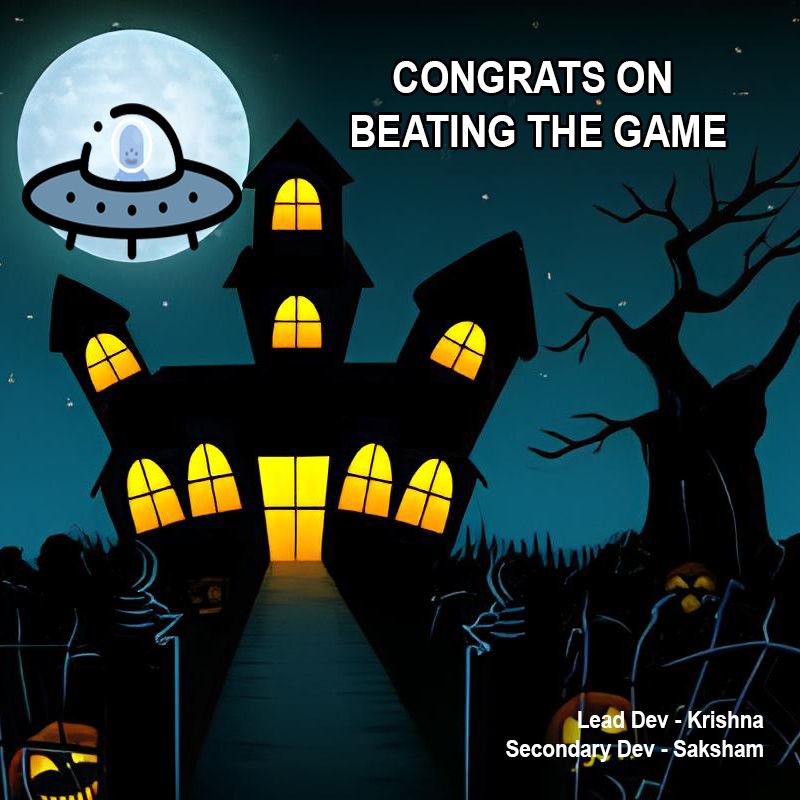
<style>
.page{position:relative;width:800px;height:800px}
.page>*{position:absolute;margin:0}
.t1{font:45.3px "Arial-BoldMT";color:#ffffff;scale:0.84 1}
.t2{font:23.9px "Arial-BoldMT";color:#ffffff;scale:0.86 1}
</style>
<div class="page">
<p class="t1" style="left:352px;top:61px;width:374px;height:86px;text-align:center">CONGRATS ON <br>BEATING THE GAME</p>
<p class="t2" style="left:506px;top:711px;width:258px;height:51px">Lead Dev - Krishna<br>Secondary Dev - Saksham</p>
</div>
